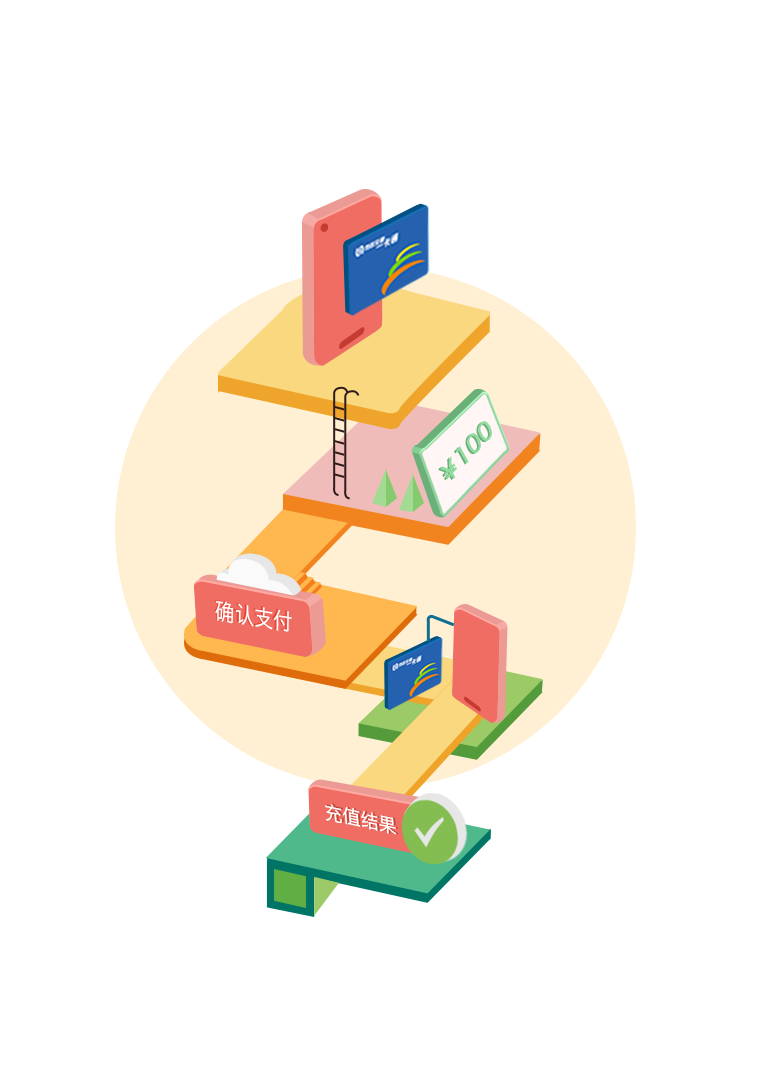
<style>
.page{position:relative;width:760px;height:1084px;background:#ffffff}
.page>*{position:absolute;margin:0}
.t1{font:22.3px "HiraginoSansGB-W3";color:#6baf79;font-weight:bold;scale:1.06 1}
.t2{font:22.3px "HiraginoSansGB-W3";color:#8edd9e;font-weight:bold;scale:1.06 1}
.t3{font:23px "HiraginoSansGB-W3";color:#ffffff;scale:0.85 1}
.t4{font:19.2px "HiraginoSansGB-W3";color:#ffffff;scale:0.95 1}
.t5{font:19.2px "HiraginoSansGB-W3";scale:0.95 1}
</style>
<div class="page">
<p class="t1" style="left:438px;top:422px;width:52px;height:59px;rotate:-48deg">￥100</p>
<p class="t2" style="left:440px;top:421px;width:52px;height:59px;rotate:-48deg">￥100</p>
<p class="t3" style="left:215px;top:600px;width:77px;height:32px;rotate:9deg">确认支付</p>
<p class="t4" style="left:325px;top:804px;width:72px;height:31px;rotate:12deg">充值结果</p>
<p class="t5" style="left:327px;top:803px;width:72px;height:32px;rotate:12deg">充值结果</p>
</div>
